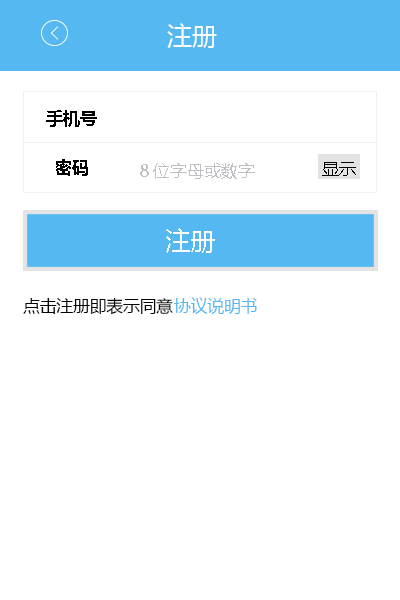
<style>
.page{position:relative;width:400px;height:600px;background:#ffffff}
.page>*{position:absolute;margin:0}
.t1{font:25px "MicrosoftYaHei";color:#fefdfd}
.t2{font:16.7px "MicrosoftYaHei-Bold";color:#000000}
.t3{font:16.7px "MicrosoftYaHei";color:#bfc0c4}
.t4{font:16.7px "MicrosoftYaHei";color:#040404}
.t5{font:25px "MicrosoftYaHei";color:#fefefe}
.t6{font:16.7px "MicrosoftYaHei";color:#55b8f1}
</style>
<div class="page">
<p class="t1" style="left:167px;top:23px;width:50px;height:25px">注册</p>
<p class="t2" style="left:46px;top:110px;width:51px;height:17px">手机号</p>
<p class="t2" style="left:56px;top:159px;width:32px;height:17px">密码</p>
<p class="t3" style="left:140px;top:163px;width:115px;height:16px">8位字母或数字</p>
<p class="t4" style="left:322px;top:162px;width:34px;height:14px">显示</p>
<p class="t5" style="left:166px;top:228px;width:49px;height:25px">注册</p>
<p class="t4" style="left:23px;top:297px;width:150px;height:18px">点击注册即表示同意</p>
<p class="t6" style="left:174px;top:297px;width:83px;height:17px">协议说明书</p>
</div>
